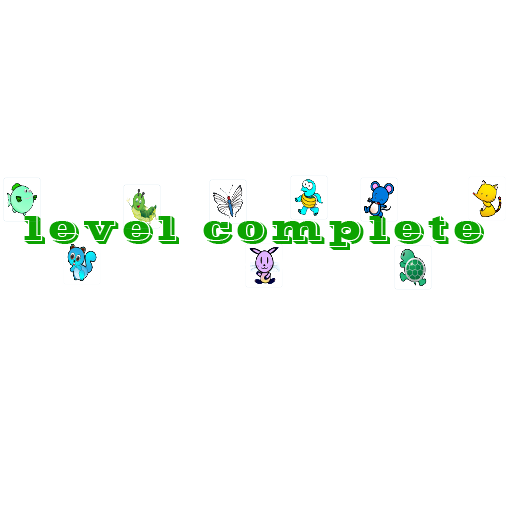
<style>
.page{position:relative;width:512px;height:512px;background:#ffffff}
.page>*{position:absolute;margin:0}
.t1{font:36px "VinetaBT-Regular";letter-spacing:0.1em;color:#0ca301}
</style>
<div class="page">
<p class="t1" style="left:24px;top:216px;width:460px;height:34px">level complete</p>
</div>
